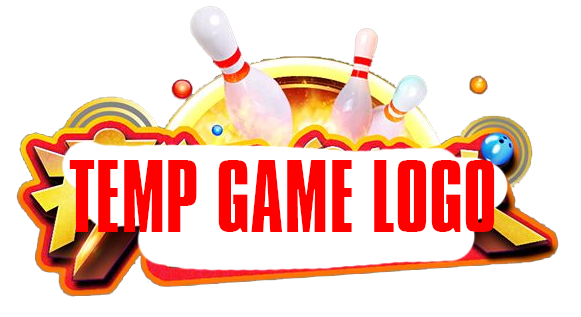
<style>
.page{position:relative;width:581px;height:317px;background:#ffffff}
.page>*{position:absolute;margin:0}
.t1{font:88.6px "Compacta";color:#ff0000;font-variant:small-caps}
</style>
<div class="page">
<p class="t1" style="left:69px;top:160px;width:426px;height:72px">TEMP GAME LOGO</p>
</div>
